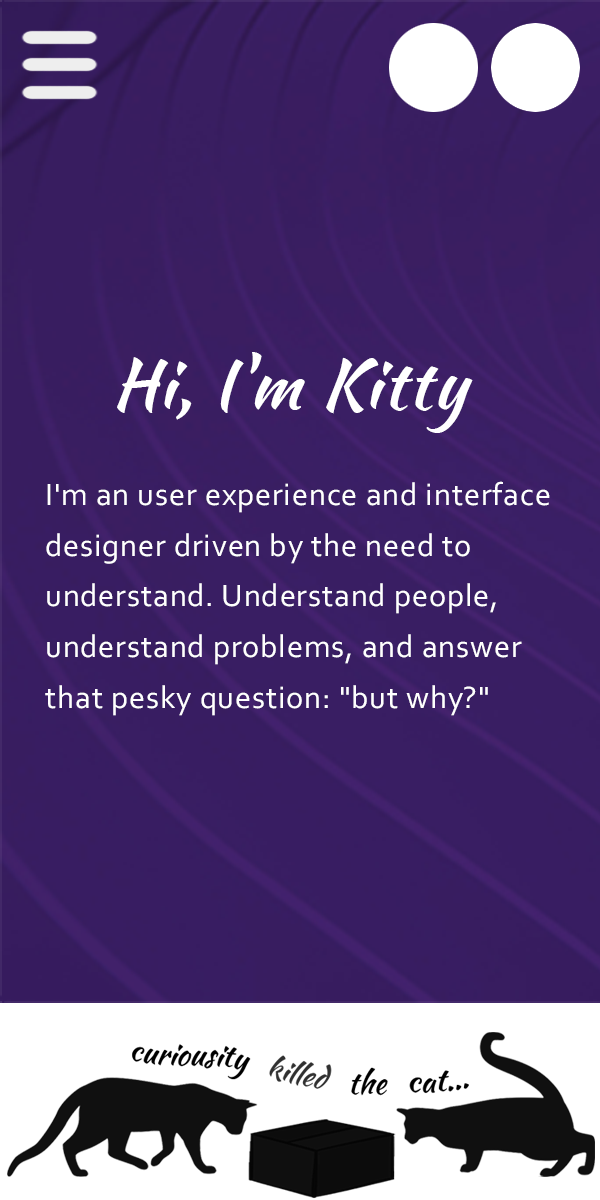
<style>
.page{position:relative;width:600px;height:1200px}
.page>*{position:absolute;margin:0}
.t1{font:67.8px "KaushanScript-Regular";letter-spacing:0.025em;color:#ffffff}
.t2{font:32.2px/50.9px "Corbel";letter-spacing:0.025em;color:#ffffff}
</style>
<div class="page">
<p class="t1" style="left:117px;top:352px;width:356px;height:81px">Hi, I'm Kitty</p>
<p class="t2" style="left:45px;top:481px;width:505px;height:235px">I'm an user experience and interface <br>designer driven by the need to <br>understand. Understand people, <br>understand problems, and answer <br>that pesky question: "but why?"</p>
</div>
